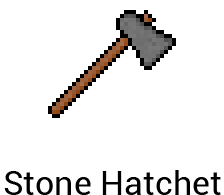
<style>
.page{position:relative;width:224px;height:195px;background:#ffffff}
.page>*{position:absolute;margin:0}
.t1{font:34.1px "Roboto-Regular";color:#000000}
</style>
<div class="page">
<p class="t1" style="left:4px;top:170px;width:217px;height:25px">Stone Hatchet</p>
</div>
